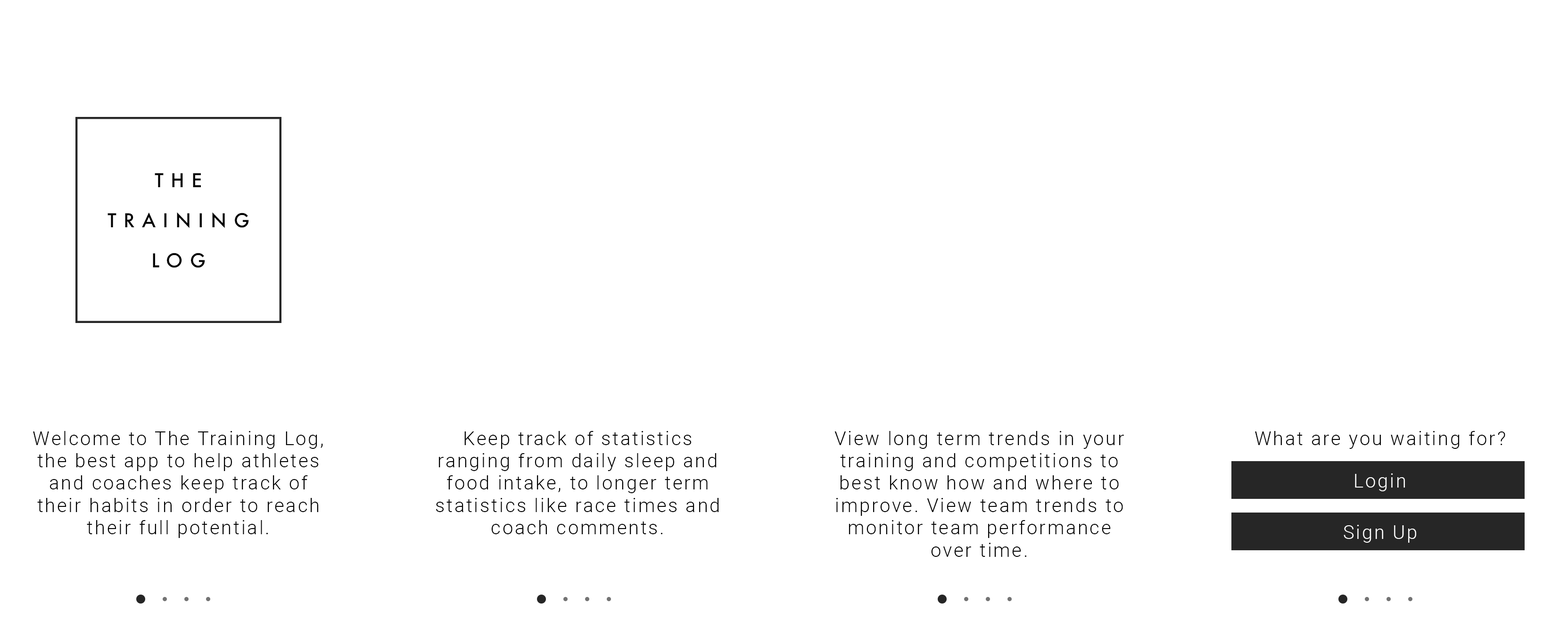
<style>
.page{position:relative;width:1568px;height:629px;background:#ffffff}
.page>*{position:absolute;margin:0}
.t1{font:18.6px/40.2px "Futura-Medium";letter-spacing:0.38em;color:#000000;text-transform:uppercase}
.t2{font:18.6px "Roboto-Light";letter-spacing:0.1em;color:#000000}
.t3{font:18.6px "Roboto-Light";letter-spacing:0.1em;color:#ffffff}
</style>
<div class="page">
<p class="t1" style="left:107px;top:173px;width:142px;height:95px;text-align:center">The<br>Training<br>Log</p>
<p class="t2" style="left:33px;top:431px;width:290px;height:107px;text-align:center">Welcome to The Training Log, the best app to help athletes and coaches keep track of their habits in order to reach their full potential.</p>
<p class="t2" style="left:436px;top:431px;width:283px;height:103px;text-align:center">Keep track of statistics ranging from daily sleep and food intake, to longer term statistics like race times and coach comments.</p>
<p class="t2" style="left:834px;top:431px;width:290px;height:126px;text-align:center">View long term trends in your  training and competitions to best know how and where to improve. View team trends to monitor team performance over time.</p>
<p class="t2" style="left:1255px;top:431px;width:250px;height:18px">What are you waiting for?</p>
<p class="t3" style="left:1355px;top:473px;width:50px;height:18px">Login</p>
<p class="t3" style="left:1344px;top:525px;width:72px;height:18px">Sign Up</p>
</div>
